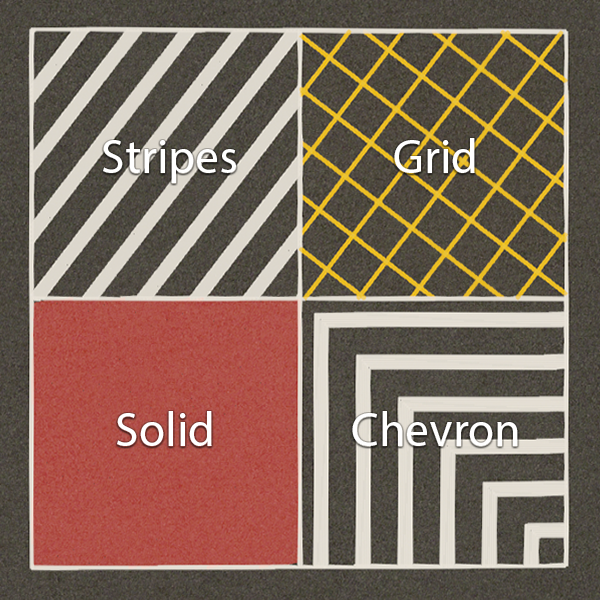
<style>
.page{position:relative;width:600px;height:600px}
.page>*{position:absolute;margin:0}
.t1{font:48px "MyriadPro-Regular";color:#ffffff}
</style>
<div class="page">
<p class="t1" style="left:103px;top:140px;width:133px;height:43px">Stripes</p>
<p class="t1" style="left:394px;top:138px;width:81px;height:35px">Grid</p>
<p class="t1" style="left:117px;top:411px;width:95px;height:35px">Solid</p>
<p class="t1" style="left:352px;top:411px;width:166px;height:35px">Chevron</p>
</div>
